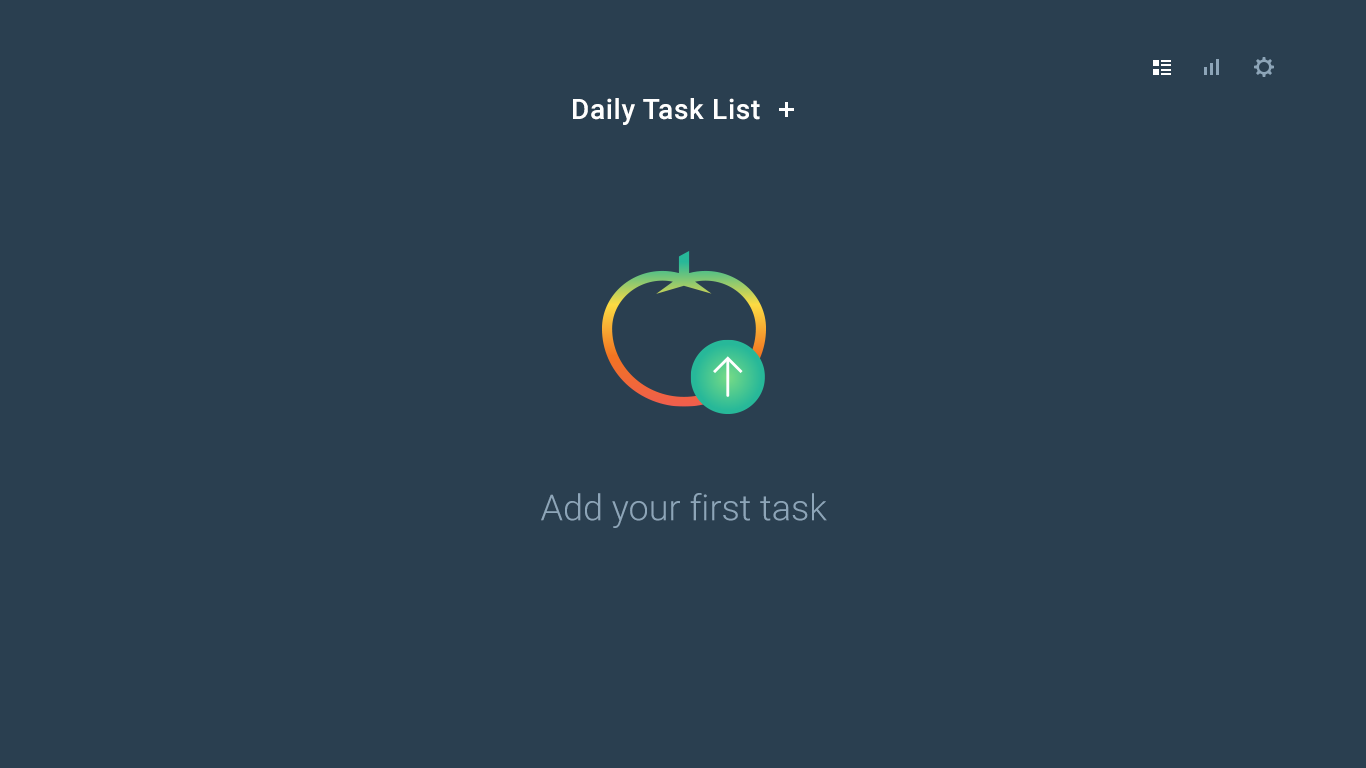
<style>
.page{position:relative;width:1366px;height:768px;background:#2a3f50}
.page>*{position:absolute;margin:0}
.t1{font:28px "Roboto-Medium";letter-spacing:0.025em;color:#ffffff}
.t2{font:36px "Roboto-Light";color:#8da5b8}
</style>
<div class="page">
<p class="t1" style="left:573px;top:98px;width:187px;height:27px">Daily Task List</p>
<p class="t2" style="left:541px;top:493px;width:286px;height:35px">Add your first task</p>
</div>
